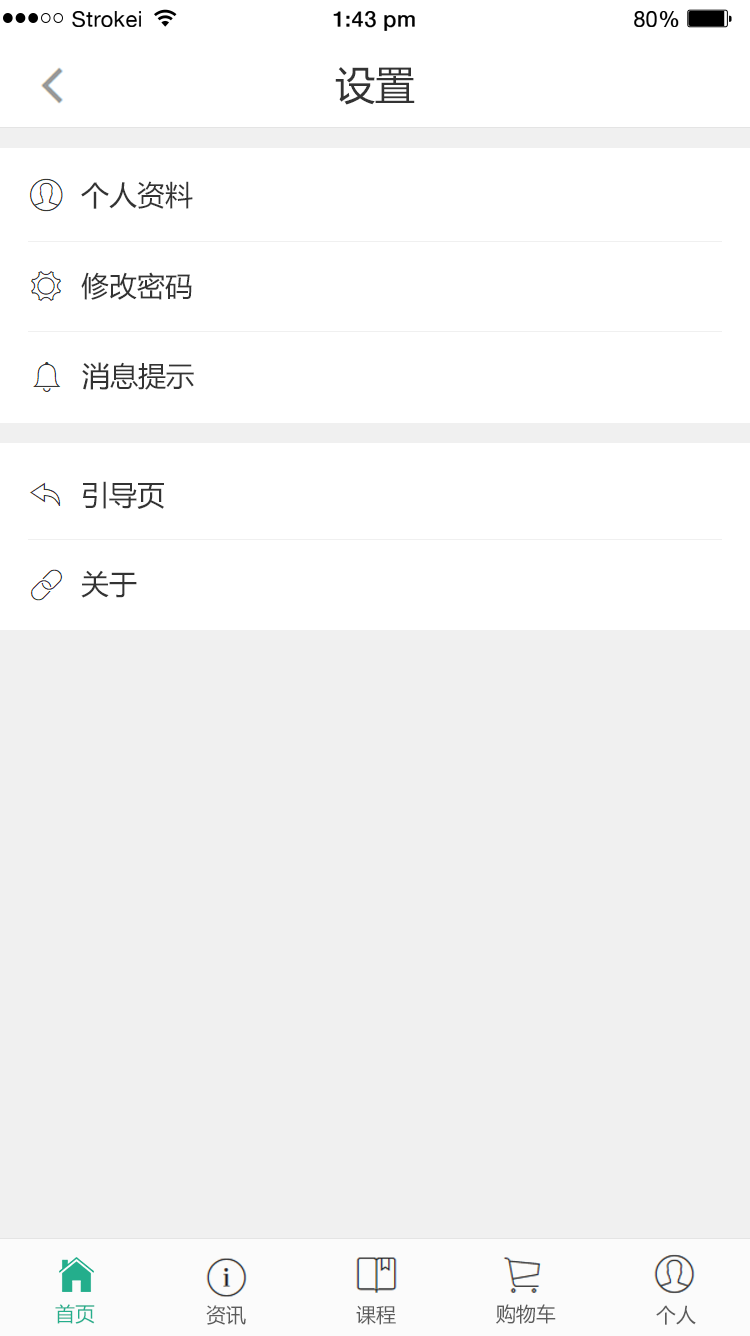
<style>
.page{position:relative;width:750px;height:1336px;background:#f0f0f0}
.page>*{position:absolute;margin:0}
.t1{font:21.8px "HelveticaNeue";letter-spacing:0.02em;color:#000000}
.t2{font:21.8px "HelveticaNeue-Medium";letter-spacing:0.02em;color:#000000}
.t3{font:40px "MicrosoftYaHei";color:#333333}
.t4{font:28px "MicrosoftYaHei";color:#333333}
.t5{font:20px "MicrosoftYaHei";color:#24ae8c}
.t6{font:20px "MicrosoftYaHei";color:#5b5b5b}
</style>
<div class="page">
<p class="t1" style="left:72px;top:11px;width:69px;height:16px">Strokei</p>
<p class="t2" style="left:333px;top:11px;width:82px;height:20px">1:43 pm</p>
<p class="t1" style="left:634px;top:11px;width:45px;height:16px">80<span class="t2">%</span></p>
<p class="t3" style="left:335px;top:67px;width:80px;height:38px">设置</p>
<p class="t4" style="left:81px;top:181px;width:112px;height:28px">个人资料</p>
<p class="t4" style="left:81px;top:272px;width:111px;height:28px">修改密码</p>
<p class="t4" style="left:82px;top:362px;width:112px;height:28px">消息提示</p>
<p class="t4" style="left:83px;top:481px;width:81px;height:28px">引导页</p>
<p class="t4" style="left:81px;top:570px;width:56px;height:28px">关于</p>
<p class="t5" style="left:55px;top:1304px;width:40px;height:20px">首页</p>
<p class="t6" style="left:206px;top:1305px;width:40px;height:20px">资讯</p>
<p class="t6" style="left:356px;top:1305px;width:40px;height:20px">课程</p>
<p class="t6" style="left:496px;top:1304px;width:60px;height:20px">购物车</p>
<p class="t6" style="left:656px;top:1305px;width:40px;height:20px">个人</p>
</div>
